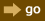
<style>
.page{position:relative;width:45px;height:21px;background:#6f4a00}
.page>*{position:absolute;margin:0}
.t1{font:12px "Verdana";color:#ffffff;font-weight:bold}
</style>
<div class="page">
<p class="t1" style="left:25px;top:6px;width:16px;height:10px">go</p>
</div>
